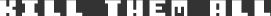
<style>
.page{position:relative;width:271px;height:16px;background:#333333}
.page>*{position:absolute;margin:0}
.t1{font:25px "I-pixel-u";letter-spacing:0.14em;color:#ffffff}
</style>
<div class="page">
<p class="t1" style="left:0px;top:0px;width:271px;height:16px">KILL THEM ALL</p>
</div>
